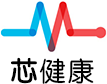
<style>
.page{position:relative;width:107px;height:84px;background:#ffffff}
.page>*{position:absolute;margin:0}
.t1{font:26.2px "STYuanti-SC-Regular";letter-spacing:0.2em;color:#000000;font-weight:bold}
.t2{font:26.2px "STYuanti-SC-Regular";letter-spacing:0.1em;color:#000000}
</style>
<div class="page">
<p class="t1" style="left:11px;top:57px;width:26px;height:27px">芯</p>
<p class="t2" style="left:39px;top:58px;width:55px;height:26px">健康</p>
</div>
